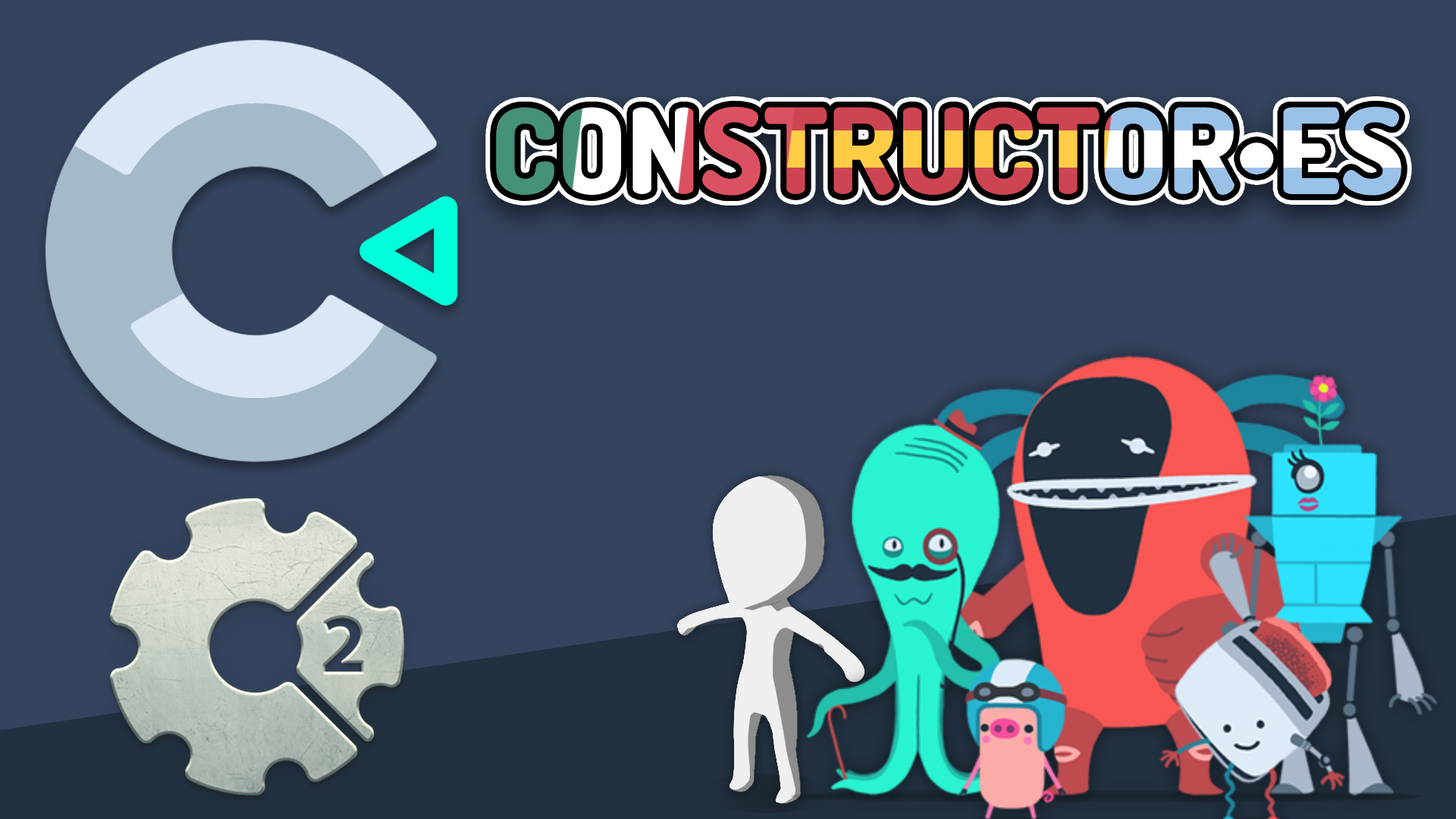
<style>
.page{position:relative;width:1456px;height:819px;background:#34445f}
.page>*{position:absolute;margin:0}
.t1{font:118.7px "Dosis-ExtraBold"}
</style>
<div class="page">
<p class="t1" style="left:496px;top:106px;width:905px;height:90px">CONSTRUCTOR•ES</p>
</div>
